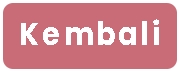
<style>
.page{position:relative;width:180px;height:72px;background:#c96c77}
.page>*{position:absolute;margin:0}
.t1{font:31.9px "Poppins-Bold";letter-spacing:0.1em;color:#ffffff;scale:0.9 1}
</style>
<div class="page">
<p class="t1" style="left:21px;top:19px;width:138px;height:26px">Kembali</p>
</div>
